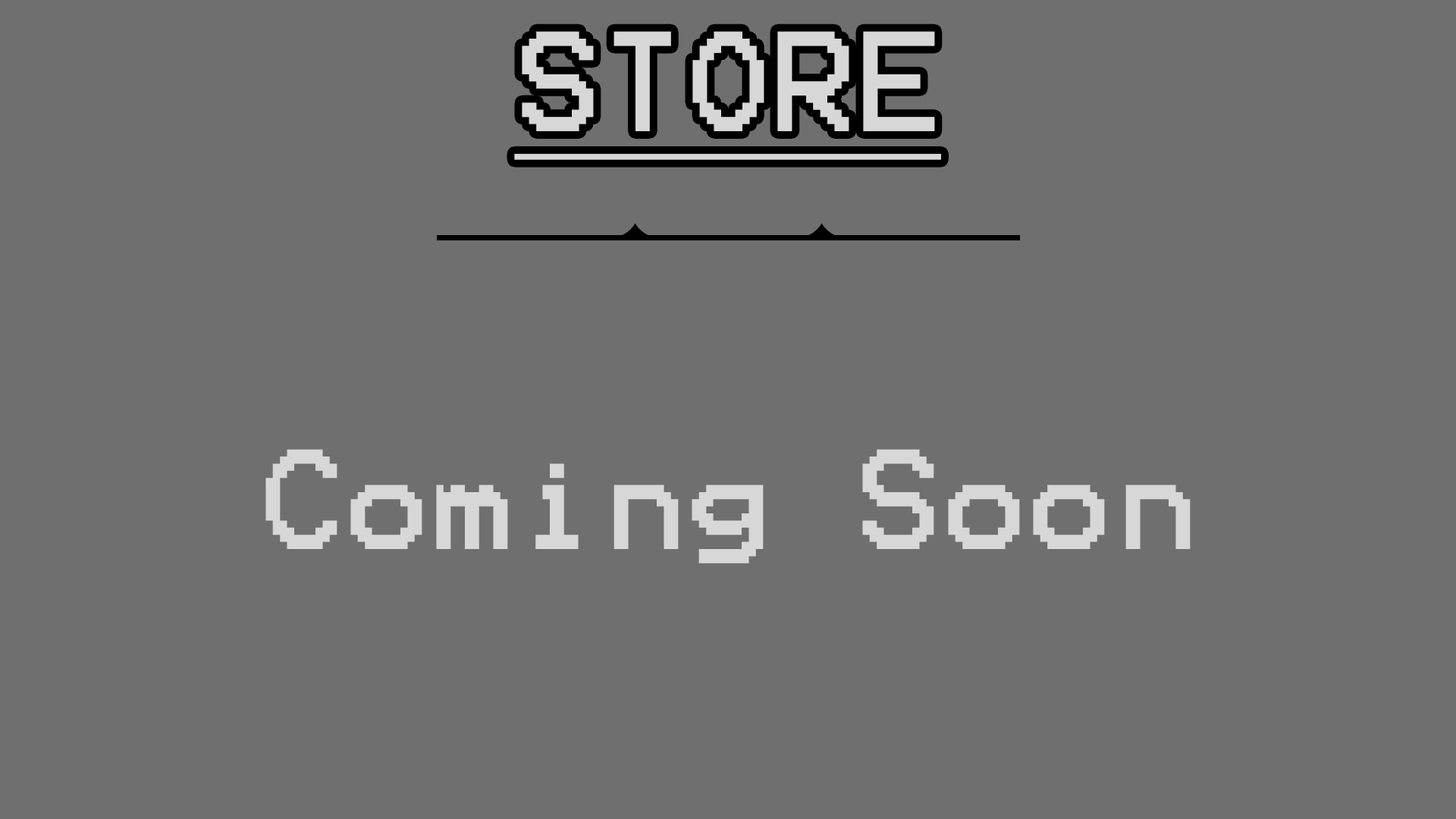
<style>
.page{position:relative;width:1456px;height:819px;background:#6f6f6f}
.page>*{position:absolute;margin:0}
.t1{font:113.7px "Terminal";color:#d7d7d7;text-decoration:underline}
.t2{font:113.7px "Terminal";color:#d7d7d7}
</style>
<div class="page">
<p class="t1" style="left:514px;top:31px;width:427px;height:129px">STORE</p>
<p class="t2" style="left:265px;top:449px;width:926px;height:114px">Coming Soon</p>
</div>
